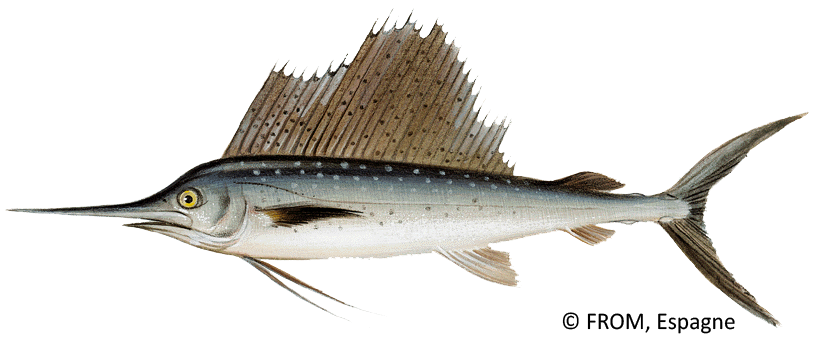
<style>
.page{position:relative;width:814px;height:338px;background:#ffffff}
.page>*{position:absolute;margin:0}
.t1{font:24px "Calibri";color:#000000}
</style>
<div class="page">
<p class="t1" style="left:562px;top:312px;width:173px;height:22px">© FROM, Espagne</p>
</div>
